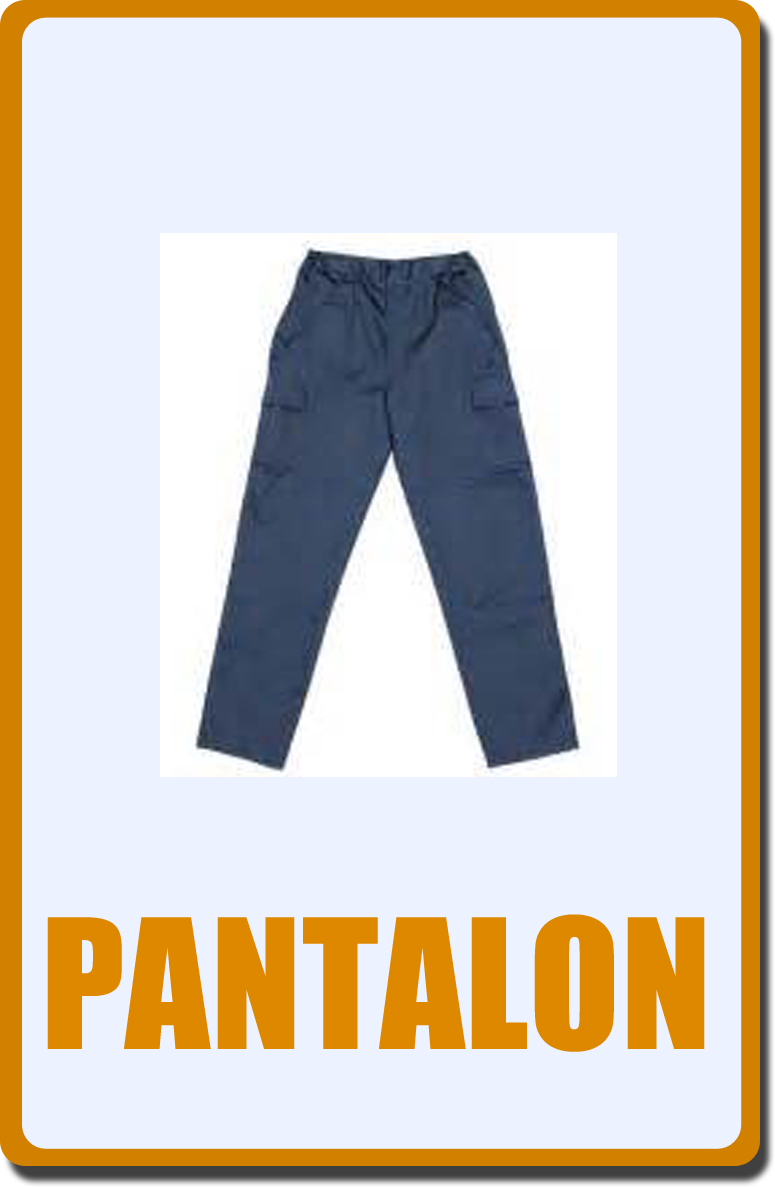
<style>
.page{position:relative;width:775px;height:1187px;background:#ecf2ff}
.page>*{position:absolute;margin:0}
.t1{font:166.7px "Impact";letter-spacing:0.005em;color:#de8800}
</style>
<div class="page">
<p class="t1" style="left:47px;top:914px;width:658px;height:138px">PANTALON</p>
</div>
